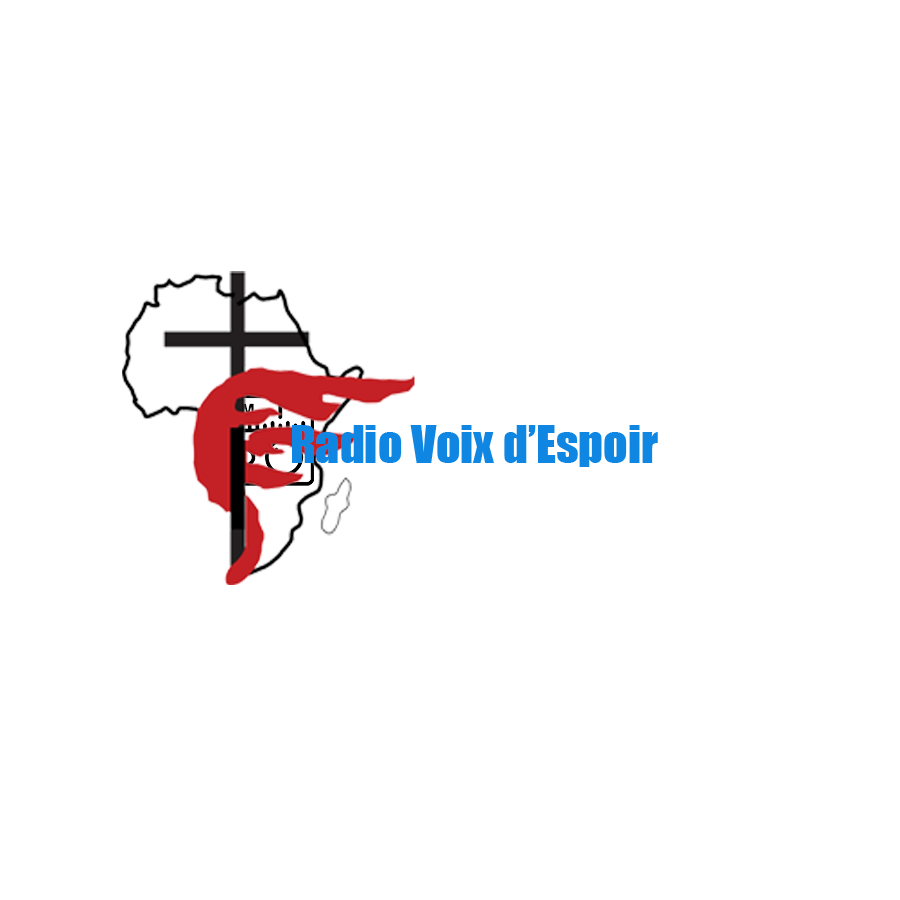
<style>
.page{position:relative;width:900px;height:900px;background:#ffffff}
.page>*{position:absolute;margin:0}
.t1{font:48px "Impact";color:#0e86e2}
</style>
<div class="page">
<p class="t1" style="left:292px;top:425px;width:366px;height:42px">Radio Voix d’Espoir</p>
</div>
